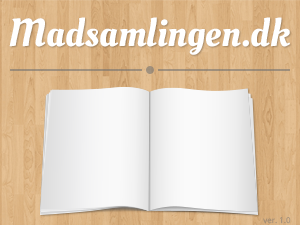
<style>
.page{position:relative;width:300px;height:225px}
.page>*{position:absolute;margin:0}
.t1{font:39px "OleoScript-Regular";color:#ffffff}
.t2{font:8px "OpenSans"}
</style>
<div class="page">
<p class="t1" style="left:9px;top:17px;width:281px;height:38px">Madsamlingen.dk</p>
<p class="t2" style="left:263px;top:217px;width:28px;height:7px">ver. 1.0</p>
</div>
